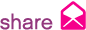
<style>
.page{position:relative;width:86px;height:30px;background:#ffffff}
.page>*{position:absolute;margin:0}
.t1{font:20.8px "ChaletE-LondonSixty";color:#92377d}
</style>
<div class="page">
<p class="t1" style="left:0px;top:13px;width:53px;height:17px">share</p>
</div>
